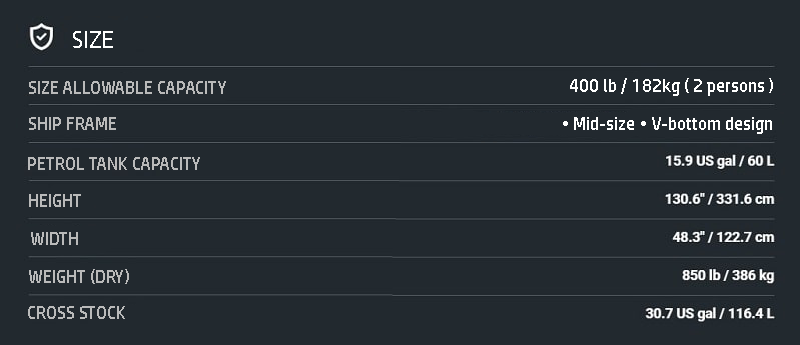
<style>
.page{position:relative;width:800px;height:345px;background:#22292f}
.page>*{position:absolute;margin:0}
.t1{font:24px "HPSimplified-Regular";color:#ffffff}
.t2{font:18px "HPSimplified-Regular";color:#ffffff}
.t3{font:18px "HPSimplified-Regular";color:#bababa}
</style>
<div class="page">
<p class="t1" style="left:73px;top:31px;width:40px;height:17px">SIZE</p>
<p class="t2" style="left:570px;top:78px;width:203px;height:18px">400 lb / 182kg ( 2 persons )</p>
<p class="t2" style="left:29px;top:80px;width:742px;height:18px"><span class="t3">SIZE ALLOWABLE CAPACITY                                                                                       </span>600 lb / 272kg (3 Persons)</p>
<p class="t2" style="left:29px;top:117px;width:743px;height:17px"><span class="t3">SHIP FRAME</span>                                                                                                               • Mid-size • V-bottom design</p>
<p class="t3" style="left:28px;top:157px;width:172px;height:13px">PETROL TANK CAPACITY</p>
<p class="t3" style="left:29px;top:194px;width:52px;height:13px">HEIGHT</p>
<p class="t3" style="left:31px;top:232px;width:47px;height:13px">WIDTH</p>
<p class="t3" style="left:29px;top:269px;width:100px;height:15px">WEIGHT (DRY)</p>
<p class="t3" style="left:28px;top:306px;width:97px;height:13px">CROSS STOCK</p>
</div>
